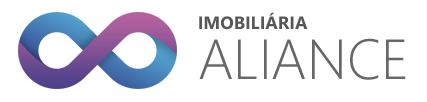
<style>
.page{position:relative;width:427px;height:102px;background:#ffffff}
.page>*{position:absolute;margin:0}
.t1{font:17.9px "SegoeUI-Bold";color:#575757}
.t2{font:56.6px "SegoeUI-Light";color:#676767}
</style>
<div class="page">
<p class="t1" style="left:199px;top:12px;width:109px;height:18px">IMOBILIÁRIA</p>
<p class="t2" style="left:199px;top:38px;width:207px;height:42px">ALIANCE</p>
</div>
